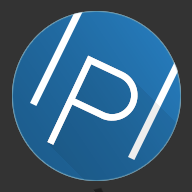
<style>
.page{position:relative;width:192px;height:192px;background:#333333}
.page>*{position:absolute;margin:0}
.t1{font:129.9px "BangnaNew";color:#ffffff}
</style>
<div class="page">
<p class="t1" style="left:47px;top:55px;width:91px;height:90px;rotate:25deg">P</p>
<p class="t1" style="left:47px;top:55px;width:91px;height:90px;rotate:25deg">P</p>
</div>
